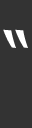
<style>
.page{position:relative;width:32px;height:128px;background:#333333}
.page>*{position:absolute;margin:0}
.t1{font:75px "AdobeGothicStd-Bold";color:#ffffff}
</style>
<div class="page">
<p class="t1" style="left:3px;top:29px;width:25px;height:19px;rotate:180deg">“v</p>
</div>
